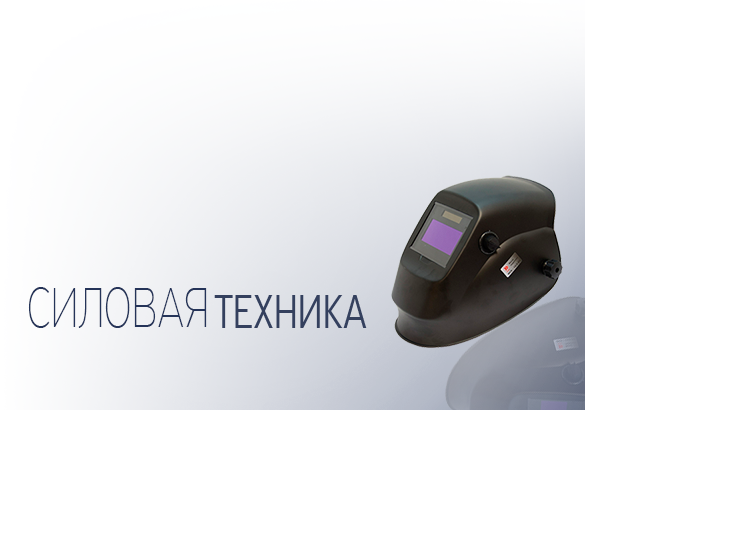
<style>
.page{position:relative;width:750px;height:550px;background:#ffffff}
.page>*{position:absolute;margin:0}
.t1{font:60px "PFHighwaySansPro-ExtraThin";letter-spacing:0.01em;color:#253459;scale:0.75 1}
.t2{font:72px "PFFusionSansPro-Black";letter-spacing:0.01em;color:#54546b;scale:0.75 1}
.t3{font:50px "PFHighwaySansPro-Light";letter-spacing:0.01em;color:#34405e;scale:0.75 1}
</style>
<div class="page">
<p class="t1" style="left:28px;top:287px;width:179px;height:41px"><span class="t2">  </span>СИЛОВАЯ</p>
<p class="t3" style="left:214px;top:295px;width:153px;height:33px"><span class="t2">           </span>ТЕХНИКА</p>
</div>
